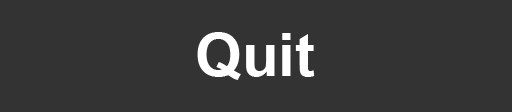
<style>
.page{position:relative;width:512px;height:112px;background:#333333}
.page>*{position:absolute;margin:0}
.t1{font:60px "Arial-BoldMT";color:#ffffff}
</style>
<div class="page">
<p class="t1" style="left:197px;top:32px;width:118px;height:48px">Quit</p>
</div>
